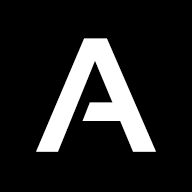
<style>
.page{position:relative;width:192px;height:192px;background:#000000}
.page>*{position:absolute;margin:0}
.t1{font:161.7px "Sansation-Bold";letter-spacing:0.05em;color:#ffffff}
</style>
<div class="page">
<p class="t1" style="left:36px;top:38px;width:120px;height:114px">A</p>
</div>
